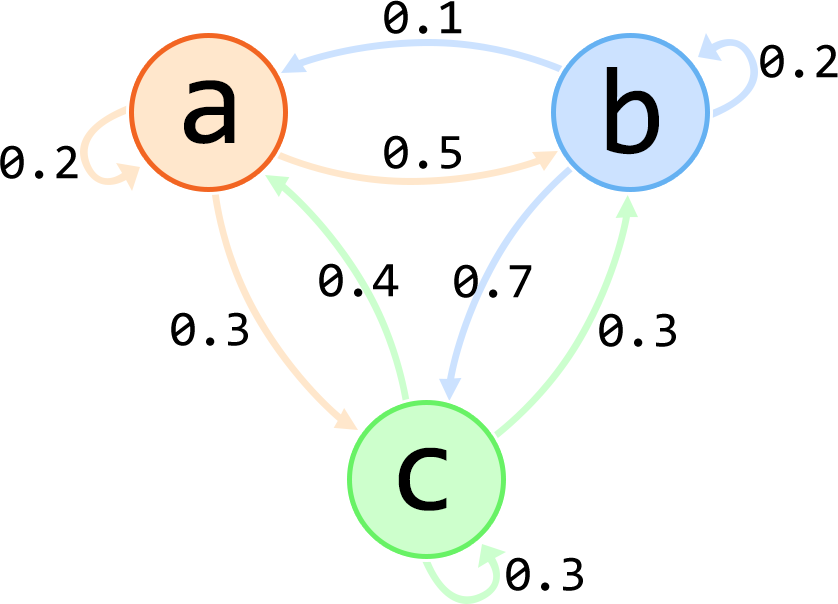
<style>
.page{position:relative;width:838px;height:604px;background:#ffffff}
.page>*{position:absolute;margin:0}
.t1{font:50px "Consolas";color:#000000}
.t2{font:125px "Consolas";color:#000000}
</style>
<div class="page">
<p class="t1" style="left:384px;top:0px;width:78px;height:34px">0.1</p>
<p class="t1" style="left:760px;top:44px;width:78px;height:34px">0.2</p>
<p class="t2" style="left:606px;top:67px;width:53px;height:88px">b</p>
<p class="t2" style="left:184px;top:80px;width:51px;height:64px">a</p>
<p class="t1" style="left:384px;top:135px;width:77px;height:34px">0.5</p>
<p class="t1" style="left:0px;top:145px;width:78px;height:34px">0.2</p>
<p class="t1" style="left:319px;top:263px;width:80px;height:34px">0.4</p>
<p class="t1" style="left:454px;top:264px;width:78px;height:34px">0.7</p>
<p class="t1" style="left:171px;top:312px;width:77px;height:34px">0.3</p>
<p class="t1" style="left:599px;top:313px;width:77px;height:34px">0.3</p>
<p class="t2" style="left:398px;top:447px;width:49px;height:64px">c</p>
<p class="t1" style="left:506px;top:557px;width:77px;height:34px">0.3</p>
</div>
